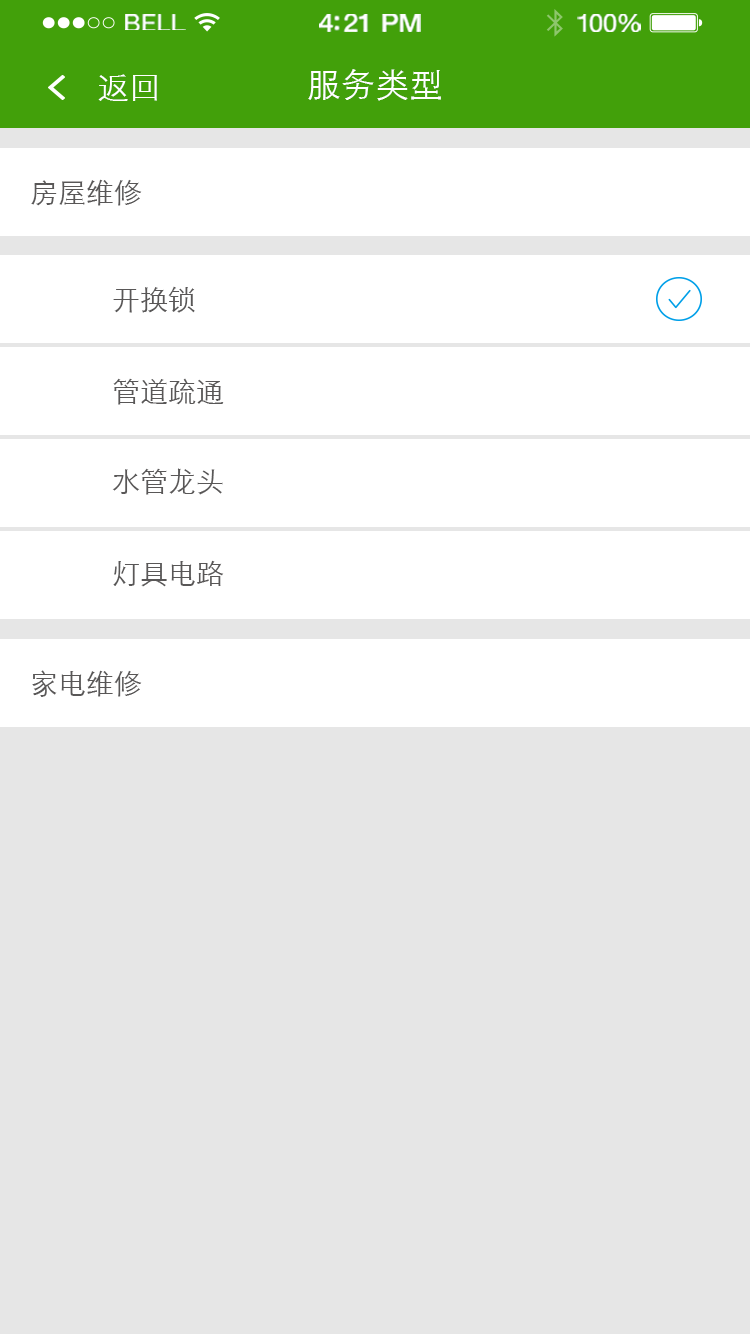
<style>
.page{position:relative;width:750px;height:1334px;background:#e6e6e6}
.page>*{position:absolute;margin:0}
.t1{font:23.3px "HelveticaNeue";letter-spacing:0.02em;color:#ffffff;scale:1.06 1}
.t2{font:25.3px "HelveticaNeue-Medium";letter-spacing:-0.02em;color:#ffffff;scale:1.06 1}
.t3{font:24.3px "HelveticaNeue";letter-spacing:-0.02em;color:#ffffff;scale:1.06 1}
.t4{font:32px "STXihei";color:#ffffff}
.t5{font:34px "STXihei";color:#ffffff}
.t6{font:28px "STXihei";color:#595757}
</style>
<div class="page">
<p class="t1" style="left:125px;top:14px;width:61px;height:16px">BELL</p>
<p class="t2" style="left:319px;top:14px;width:102px;height:18px">4:21 PM</p>
<p class="t3" style="left:577px;top:14px;width:64px;height:18px">100%</p>
<p class="t4" style="left:98px;top:74px;width:59px;height:27px">返回</p>
<p class="t5" style="left:308px;top:69px;width:133px;height:32px">服务类型</p>
<p class="t6" style="left:31px;top:179px;width:111px;height:27px">房屋维修</p>
<p class="t6" style="left:113px;top:286px;width:82px;height:27px">开换锁</p>
<p class="t6" style="left:113px;top:378px;width:111px;height:27px">管道疏通</p>
<p class="t6" style="left:112px;top:468px;width:111px;height:27px">水管龙头</p>
<p class="t6" style="left:113px;top:560px;width:111px;height:27px">灯具电路</p>
<p class="t6" style="left:32px;top:670px;width:110px;height:27px">家电维修</p>
</div>
